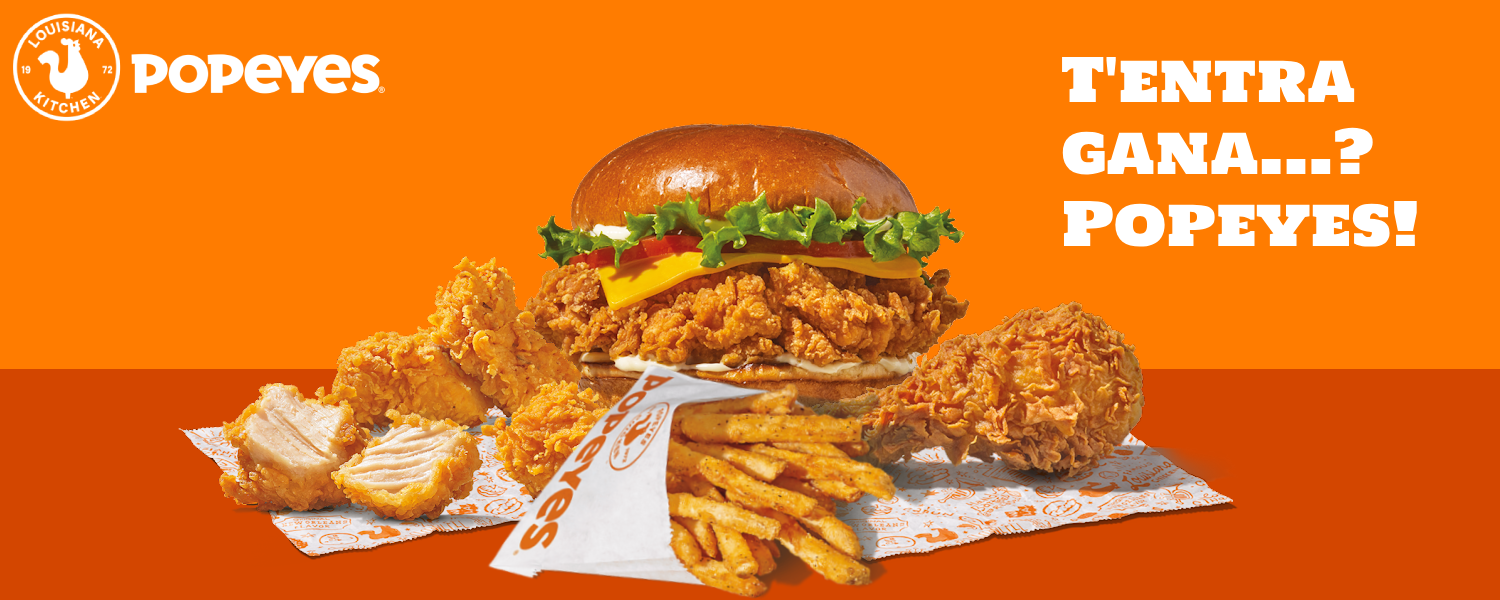
<style>
.page{position:relative;width:1500px;height:600px;background:#ff7c00}
.page>*{position:absolute;margin:0}
.t1{font:60px "HoltwoodOneSC";color:#ffffff}
</style>
<div class="page">
<p class="t1" style="left:1062px;top:57px;width:355px;height:190px">T'entra<br>gana...?<br>Popeyes!</p>
</div>
